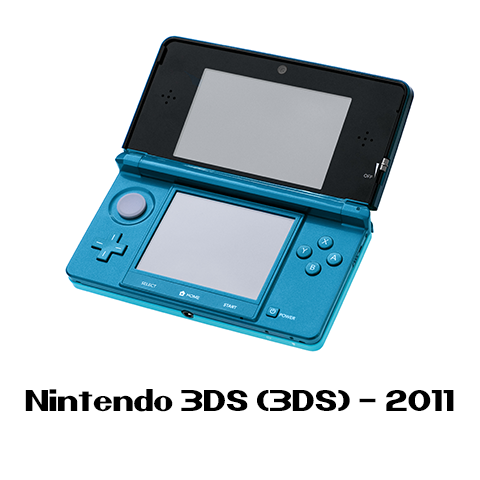
<style>
.page{position:relative;width:480px;height:480px;background:#ffffff}
.page>*{position:absolute;margin:0}
.t1{font:30px "Nintender";color:#000000}
</style>
<div class="page">
<p class="t1" style="left:25px;top:389px;width:429px;height:23px">Nintendo 3DS (3DS) - 2011</p>
</div>
